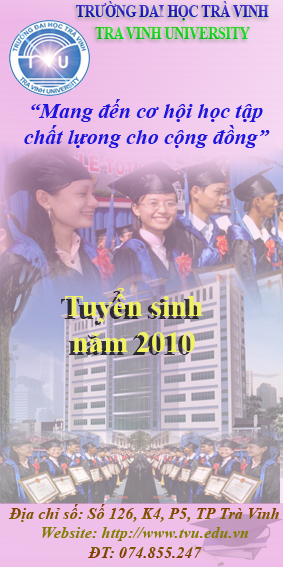
<style>
.page{position:relative;width:283px;height:567px}
.page>*{position:absolute;margin:0}
.t1{font:18px "TimesNewRomanPS-BoldMT";scale:0.75 1}
.t2{font:21.5px "TimesNewRomanPS-BoldItalicMT";color:#1c15dd}
.t3{font:30px "TimesNewRomanPS-BoldMT";color:#f0f261}
.t4{font:16.4px "TimesNewRomanPS-BoldItalicMT"}
</style>
<div class="page">
<p class="t1" style="left:76px;top:1px;width:193px;height:38px;text-align:center">TRƯỜNG DAI HỌC TRÀ VINH<br>TRA VINH UNIVERSITY</p>
<p class="t2" style="left:24px;top:99px;width:246px;height:49px;text-align:center">“Mang đến cơ hội học tập<br>chất lựong cho cộng đồng”</p>
<p class="t3" style="left:65px;top:288px;width:138px;height:64px;text-align:center">Tuyển sinh<br>năm 2010</p>
<p class="t4" style="left:8px;top:504px;width:271px;height:54px;text-align:center">Địa chỉ số: Số 126, K4, P5, TP Trà Vinh<br>Website: http://www.tvu.edu.vn<br>ĐT: 074.855.247</p>
</div>
